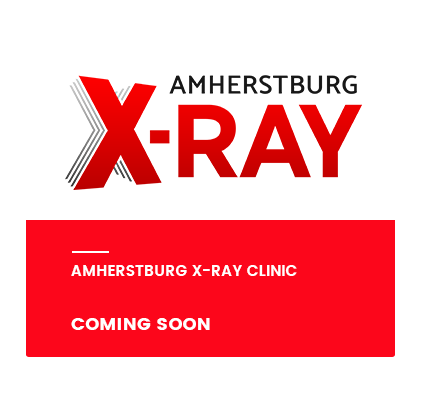
<style>
.page{position:relative;width:428px;height:396px;background:#ffffff}
.page>*{position:absolute;margin:0}
.t1{font:15px/30px "Poppins-SemiBold";letter-spacing:0.01em;color:#ffffff}
.t2{font:18px/33px "Poppins";letter-spacing:0.01em;color:#ffffff}
</style>
<div class="page">
<p class="t1" style="left:71px;top:265px;width:226px;height:65px">AMHERSTBURG X-RAY CLINIC<br><br><span class="t2">COMING SOON</span></p>
</div>
